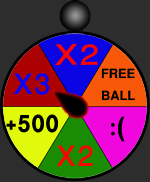
<style>
.page{position:relative;width:150px;height:182px;background:#2d2d2d}
.page>*{position:absolute;margin:0}
.t1{font:40px "WinSoftPro-Medium";color:#fa0404;scale:1.2 1}
.t2{font:18px "WinSoftPro-Bold";color:#020202}
.t3{font:36px "WinSoftPro-Bold";color:#010101}
.t4{font:48px "WinSoftPro-Medium";color:#000000}
.t5{font:40px "WinSoftPro-Medium";color:#fa0404}
</style>
<div class="page">
<p class="t1" style="left:55px;top:44px;width:43px;height:21px;rotate:-1deg">X2</p>
<p class="t2" style="left:101px;top:68px;width:34px;height:33px">FREE BALL</p>
<p class="t3" style="left:6px;top:114px;width:52px;height:19px">+500</p>
<p class="t4" style="left:111px;top:116px;width:14px;height:26px">):</p>
<p class="t5" style="left:56px;top:145px;width:37px;height:21px">X2</p>
</div>
